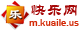
<style>
.page{position:relative;width:80px;height:30px;background:#ffffff}
.page>*{position:absolute;margin:0}
.t1{font:16px "STLiti";color:#a60808}
.t2{font:10px "FranklinGothic-Medium";color:#d32805}
</style>
<div class="page">
<p class="t1" style="left:31px;top:4px;width:46px;height:12px">快乐网</p>
<p class="t2" style="left:29px;top:19px;width:50px;height:7px">m.kuaile.us</p>
</div>
